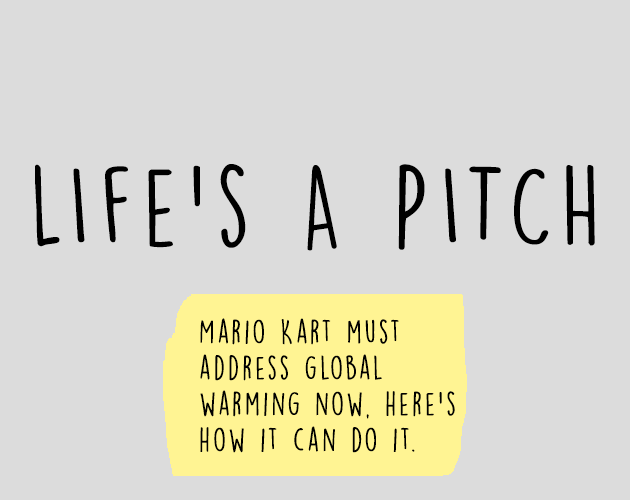
<style>
.page{position:relative;width:630px;height:500px;background:#dcdcdc}
.page>*{position:absolute;margin:0}
.t1{font:103.8px "DKLemonYellowSun";letter-spacing:0.1em;color:#000000}
.t2{font:30px "DKLemonYellowSun";letter-spacing:0.1em;color:#000000}
</style>
<div class="page">
<p class="t1" style="left:35px;top:164px;width:560px;height:87px">LIfe’s A PITCH</p>
<p class="t2" style="left:200px;top:318px;width:255px;height:135px">Mario Kart must <br>address global <br>warming now, here’s<br>how it can do it.</p>
</div>
